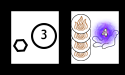
<style>
.page{position:relative;width:125px;height:75px;background:#000000}
.page>*{position:absolute;margin:0}
.t1{font:12.5px "KozGoPr6N-Bold";color:#000000}
</style>
<div class="page">
<p class="t1" style="left:41px;top:29px;width:6px;height:11px">3</p>
</div>
